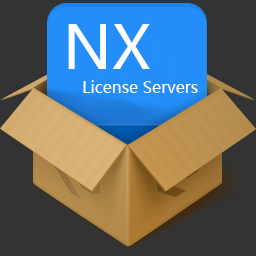
<style>
.page{position:relative;width:256px;height:256px;background:#333333}
.page>*{position:absolute;margin:0}
.t1{font:60px "MicrosoftYaHei";color:#fefefe}
.t2{font:16px "MicrosoftYaHei";color:#fefefe}
</style>
<div class="page">
<p class="t1" style="left:68px;top:24px;width:82px;height:45px">NX</p>
<p class="t2" style="left:83px;top:80px;width:115px;height:13px">License Servers</p>
</div>
